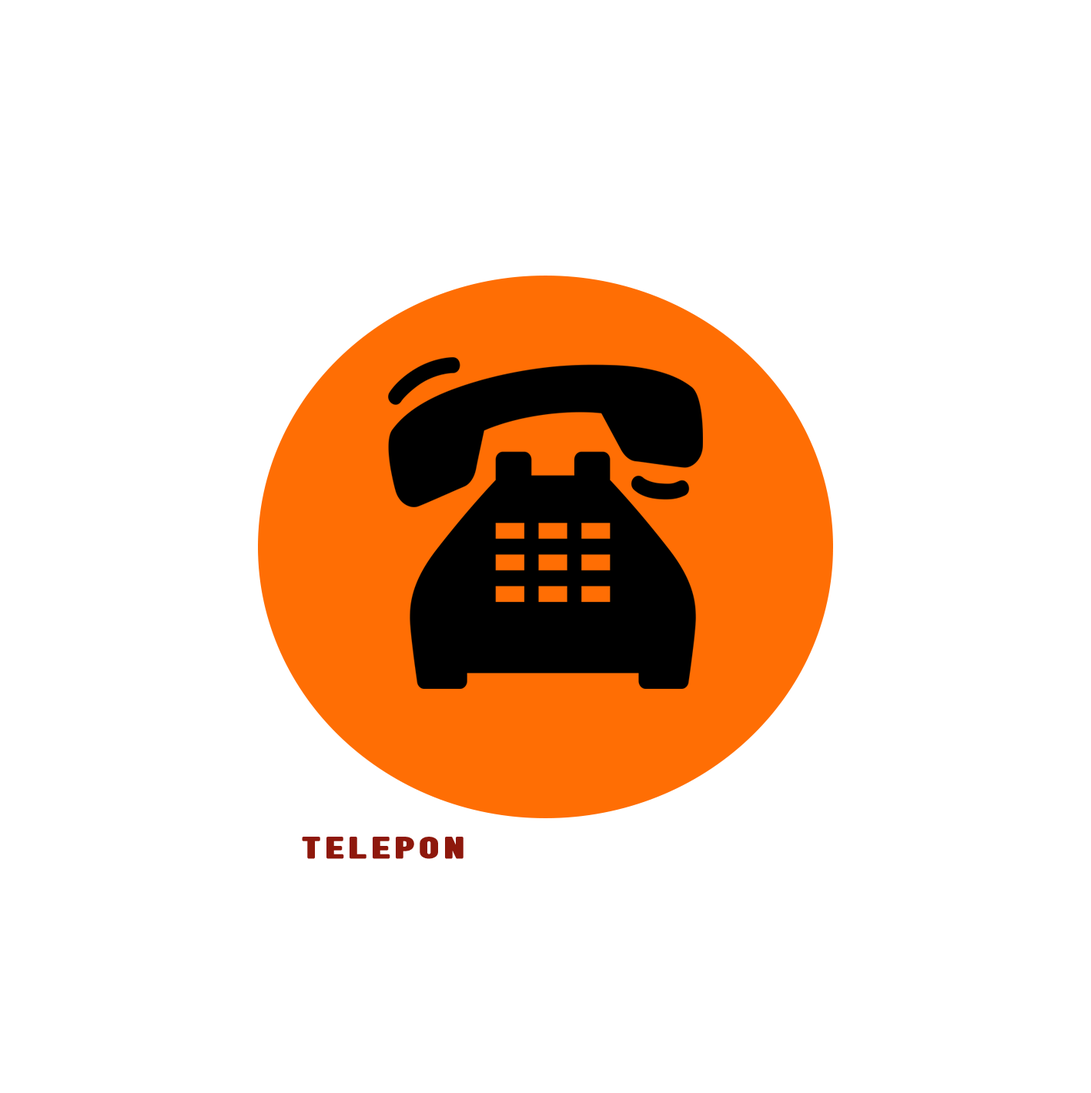
<style>
.page{position:relative;width:1091px;height:1093px;background:#ffffff}
.page>*{position:absolute;margin:0}
.t1{font:28.4px "aAkhirTahun";letter-spacing:0.15em;color:#8e180c;font-weight:bold}
</style>
<div class="page">
<p class="t1" style="left:302px;top:837px;width:161px;height:22px">Telepon</p>
</div>
